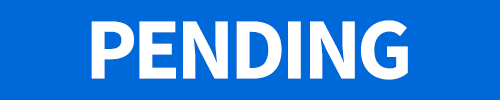
<style>
.page{position:relative;width:500px;height:100px;background:#0069d9}
.page>*{position:absolute;margin:0}
.t1{font:87.4px "SourceSansPro-Bold";letter-spacing:-0.05em;color:#ffffff}
</style>
<div class="page">
<p class="t1" style="left:91px;top:20px;width:317px;height:60px">PENDING</p>
</div>
